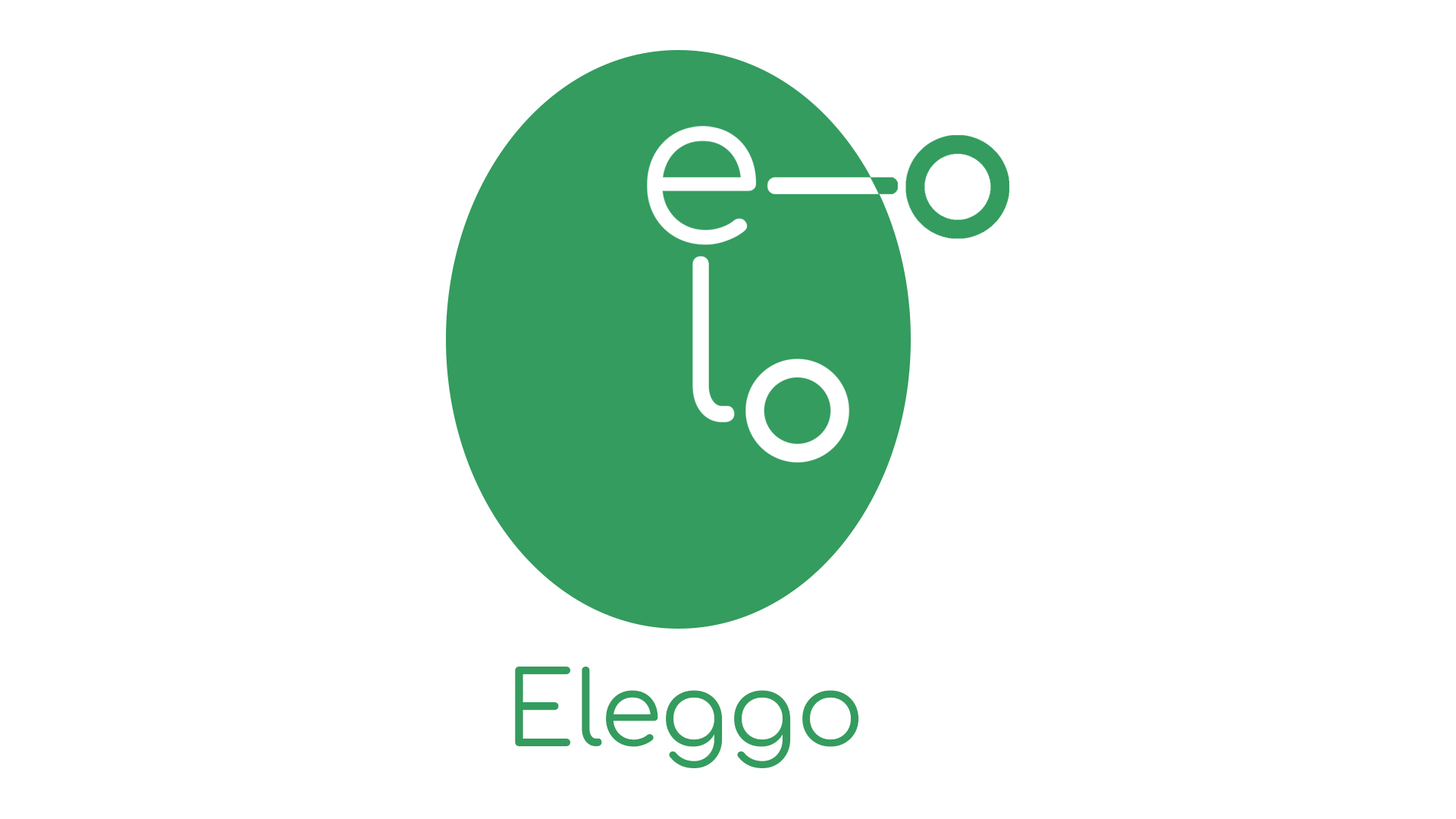
<style>
.page{position:relative;width:1456px;height:819px;background:#ffffff}
.page>*{position:absolute;margin:0}
.t1{font:100.9px "Comfortaa-Regular";color:#339c5e}
</style>
<div class="page">
<p class="t1" style="left:515px;top:667px;width:344px;height:101px">Eleggo</p>
</div>
